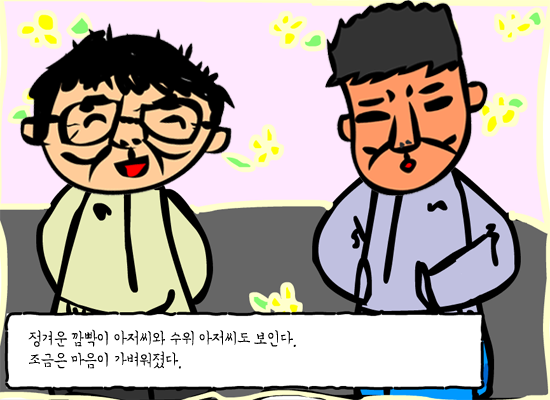
<style>
.page{position:relative;width:550px;height:400px}
.page>*{position:absolute;margin:0}
.t1{font:18px "SanGw";letter-spacing:-0.05em;color:#000000;scale:0.9 1}
</style>
<div class="page">
<p class="t1" style="left:28px;top:329px;width:268px;height:18px">정겨운 깜빡이 아저씨와 수위 아저씨도 보인다.</p>
<p class="t1" style="left:29px;top:351px;width:152px;height:18px">조금은 마음이 가벼워졌다.</p>
</div>
